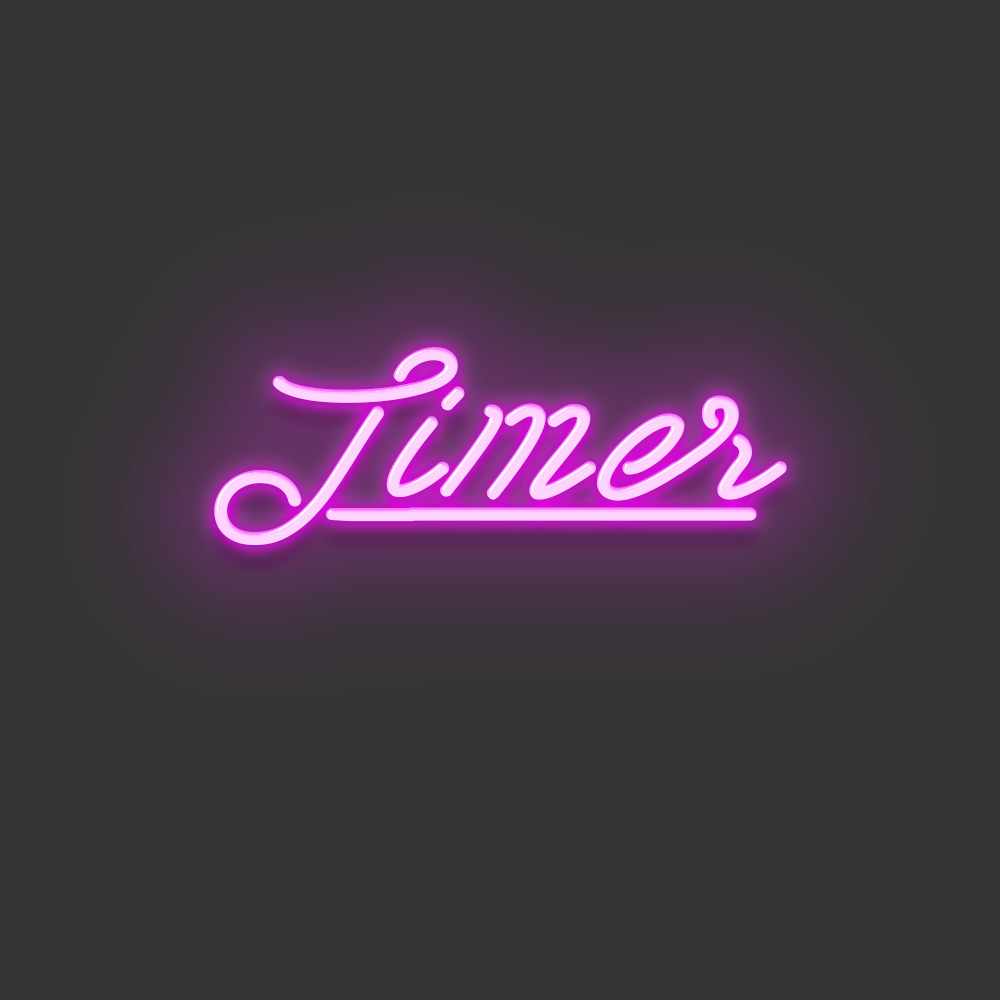
<style>
.page{position:relative;width:1000px;height:1000px;background:#333333}
.page>*{position:absolute;margin:0}
.t1{font:250px "LasEnterPersonalUseOnly";color:#fed4ff}
</style>
<div class="page">
<p class="t1" style="left:214px;top:347px;width:573px;height:198px">Timer</p>
</div>
